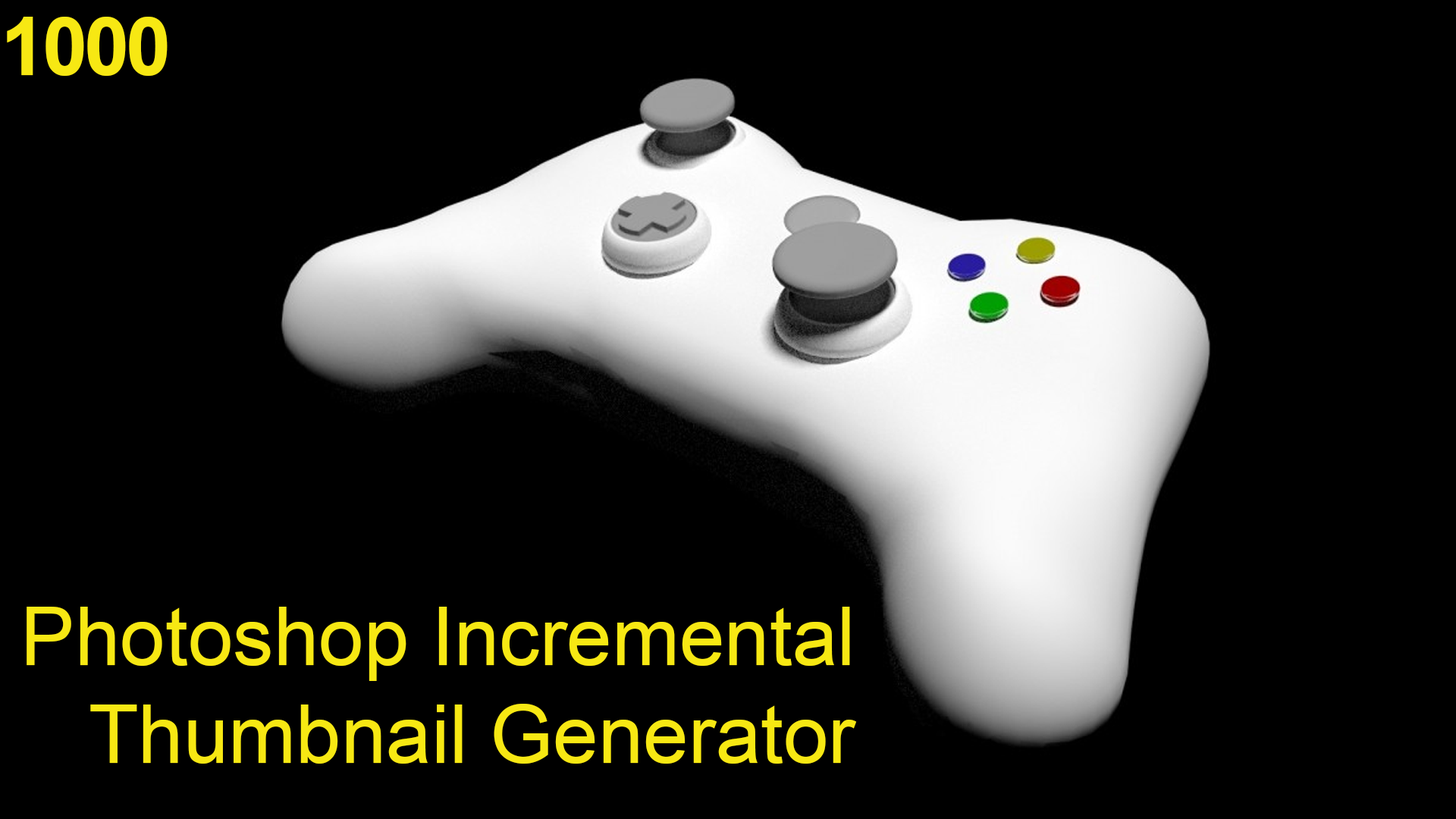
<style>
.page{position:relative;width:1456px;height:819px;background:#000000}
.page>*{position:absolute;margin:0}
.t1{font:81.1px "Arial-BoldMT";letter-spacing:-0.04em;color:#f7e813}
.t2{font:81.1px "ArialMT";color:#f7e813}
</style>
<div class="page">
<p class="t1" style="left:7px;top:17px;width:161px;height:59px">1000</p>
<p class="t2" style="left:27px;top:607px;width:830px;height:157px;text-align:right">Photoshop Incremental<br>Thumbnail Generator</p>
</div>
